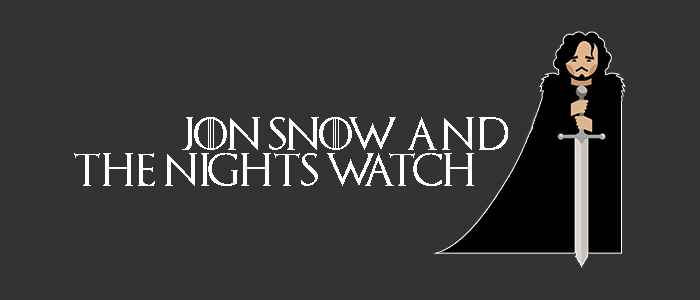
<style>
.page{position:relative;width:700px;height:300px;background:#333333}
.page>*{position:absolute;margin:0}
.t1{font:33.3px/36.1px "GameofThrones";color:#ffffff;text-transform:uppercase}
</style>
<div class="page">
<p class="t1" style="left:74px;top:117px;width:434px;height:69px">Jon snow and <br> the nights watch</p>
</div>
